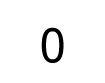
<style>
.page{position:relative;width:105px;height:83px;background:#ffffff}
.page>*{position:absolute;margin:0}
.t1{font:47.9px "DroidSans";color:#000000}
</style>
<div class="page">
<p class="t1" style="left:41px;top:27px;width:23px;height:36px">0</p>
</div>
